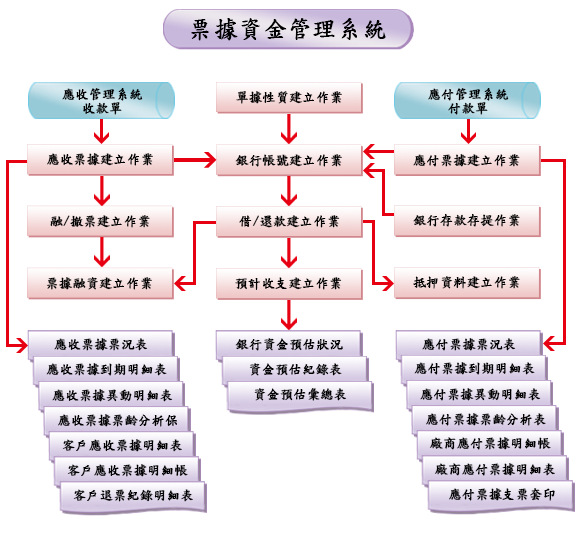
<style>
.page{position:relative;width:577px;height:545px;background:#ffffff}
.page>*{position:absolute;margin:0}
.t1{font:24px "DFKaiShu-SB-Estd-BF";color:#000000;font-weight:bold}
.t2{font:13.1px/14px "DFKaiShu-SB-Estd-BF";color:#000000;font-weight:bold}
.t3{font:13.1px "DFKaiShu-SB-Estd-BF";color:#000000;font-weight:bold}
</style>
<div class="page">
<p class="t1" style="left:191px;top:18px;width:195px;height:23px">票據資金管理系統</p>
<p class="t2" style="left:62px;top:88px;width:81px;height:27px;text-align:center">應收管理系統<br>收款單</p>
<p class="t2" style="left:428px;top:88px;width:81px;height:27px;text-align:center">應付管理系統<br>付款單</p>
<p class="t3" style="left:236px;top:91px;width:106px;height:13px">單據性質建立作業</p>
<p class="t3" style="left:47px;top:153px;width:106px;height:13px">應收票據建立作業</p>
<p class="t3" style="left:235px;top:154px;width:107px;height:13px">銀行帳號建立作業</p>
<p class="t3" style="left:413px;top:154px;width:107px;height:13px">應付票據建立作業</p>
<p class="t3" style="left:50px;top:215px;width:100px;height:13px">融/撤票建立作業</p>
<p class="t3" style="left:239px;top:215px;width:101px;height:13px">借/還款建立作業</p>
<p class="t3" style="left:413px;top:214px;width:107px;height:13px">銀行存款存提作業</p>
<p class="t3" style="left:46px;top:277px;width:106px;height:13px">票據融資建立作業</p>
<p class="t3" style="left:235px;top:277px;width:107px;height:13px">預計收支建立作業</p>
<p class="t3" style="left:413px;top:276px;width:107px;height:13px">抵押資料建立作業</p>
<p class="t3" style="left:54px;top:338px;width:94px;height:13px">應收票據票況表</p>
<p class="t3" style="left:235px;top:338px;width:108px;height:13px">銀行資金預估狀況</p>
<p class="t3" style="left:422px;top:338px;width:94px;height:13px">應付票據票況表</p>
<p class="t3" style="left:46px;top:363px;width:121px;height:13px">應收票據到期明細表</p>
<p class="t3" style="left:249px;top:363px;width:93px;height:13px">資金預估紀錄表</p>
<p class="t3" style="left:414px;top:362px;width:121px;height:13px">應付票據到期明細表</p>
<p class="t3" style="left:52px;top:389px;width:121px;height:13px">應收票據異動明細表</p>
<p class="t3" style="left:254px;top:388px;width:93px;height:13px">資金預估彙總表</p>
<p class="t3" style="left:420px;top:388px;width:121px;height:13px">應付票據異動明細表</p>
<p class="t3" style="left:58px;top:414px;width:119px;height:13px">應收票據票齡分析保</p>
<p class="t3" style="left:426px;top:413px;width:120px;height:13px">應付票據票齡分析表</p>
<p class="t3" style="left:429px;top:437px;width:122px;height:13px">廠商應付票據明細帳</p>
<p class="t3" style="left:62px;top:439px;width:120px;height:13px">客戶應收票據明細表</p>
<p class="t3" style="left:67px;top:464px;width:121px;height:13px">客戶應收票據明細帳</p>
<p class="t3" style="left:434px;top:463px;width:121px;height:13px">廠商應付票據明細表</p>
<p class="t3" style="left:73px;top:489px;width:120px;height:13px">客戶退票紀錄明細表</p>
<p class="t3" style="left:449px;top:488px;width:106px;height:13px">應付票據支票套印</p>
</div>
